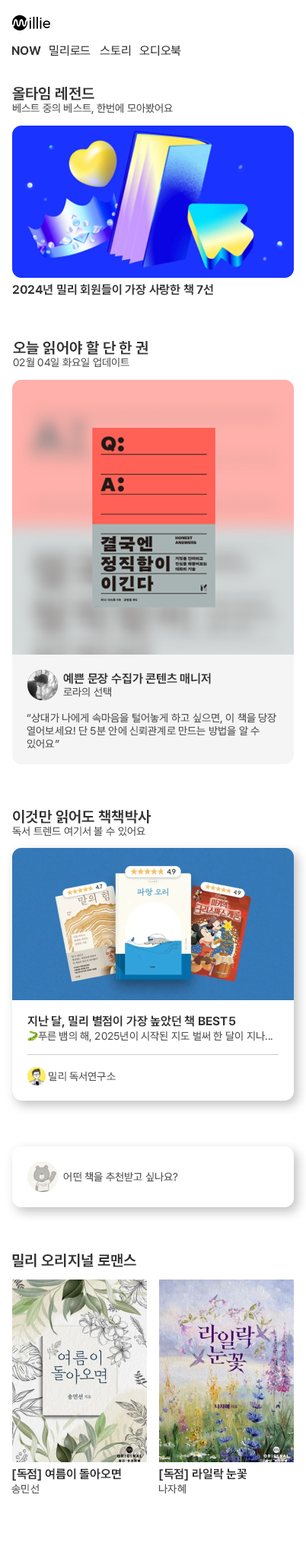
<style>
.page{position:relative;width:306px;height:1568px;background:#ffffff}
.page>*{position:absolute;margin:0}
.t1{font:12.2px "Pretendard-Bold";color:#333333}
.t2{font:12.2px "Pretendard-Regular";color:#333333}
.t3{font:15.2px "Pretendard-Bold";color:#333333}
.t4{font:10.7px "Pretendard-Regular";color:#555555}
.t5{font:10.7px "EmojiOneColor";color:#555555}
</style>
<div class="page">
<p class="t1" style="left:12px;top:46px;width:29px;height:10px">NOW</p>
<p class="t2" style="left:49px;top:45px;width:42px;height:11px">밀리로드</p>
<p class="t2" style="left:100px;top:45px;width:31px;height:11px">스토리</p>
<p class="t2" style="left:139px;top:45px;width:42px;height:11px">오디오북</p>
<p class="t3" style="left:12px;top:87px;width:82px;height:13px">올타임 레전드</p>
<p class="t4" style="left:12px;top:103px;width:161px;height:11px">베스트 중의 베스트, 한번에 모아봤어요</p>
<p class="t1" style="left:12px;top:284px;width:201px;height:11px">2024년 밀리 회원들이 가장 사랑한 책 7선</p>
<p class="t3" style="left:13px;top:341px;width:135px;height:14px">오늘 읽어야 할 단 한 권</p>
<p class="t4" style="left:13px;top:357px;width:116px;height:11px">02월 04일 화요일 업데이트</p>
<p class="t1" style="left:63px;top:673px;width:148px;height:11px">예쁜 문장 수집가 콘텐츠 매니저</p>
<p class="t4" style="left:63px;top:687px;width:48px;height:10px">로라의 선택</p>
<p class="t4" style="left:27px;top:712px;width:249px;height:37px">“상대가 나에게 속마음을 털어놓게 하고 싶으면, 이 책을 당장 <br>열어보세요! 단 5분 안에 신뢰관계로 만드는 방법을 알 수 <br>있어요”</p>
<p class="t3" style="left:13px;top:810px;width:138px;height:14px">이것만 읽어도 책책박사</p>
<p class="t4" style="left:12px;top:826px;width:133px;height:11px">독서 트렌드 여기서 볼 수 있어요</p>
<p class="t1" style="left:27px;top:1015px;width:209px;height:13px">지난 달, 밀리 별점이 가장 높았던 책 BEST5</p>
<p class="t4" style="left:27px;top:1031px;width:245px;height:11px"><span class="t5">🐍</span>푸른 뱀의 해, 2025년이 시작된 지도 벌써 한 달이 지나...</p>
<p class="t4" style="left:49px;top:1071px;width:67px;height:11px">밀리 독서연구소</p>
<p class="t4" style="left:63px;top:1171px;width:115px;height:11px">어떤 책을 추천받고 싶나요?</p>
<p class="t3" style="left:12px;top:1254px;width:124px;height:13px">밀리 오리지널 로맨스</p>
<p class="t1" style="left:12px;top:1468px;width:109px;height:13px">[독점] 여름이 돌아오면</p>
<p class="t1" style="left:159px;top:1468px;width:88px;height:13px">[독점] 라일락 눈꽃</p>
<p class="t4" style="left:11px;top:1484px;width:28px;height:10px">송민선</p>
<p class="t4" style="left:158px;top:1484px;width:28px;height:10px">나자혜</p>
</div>
